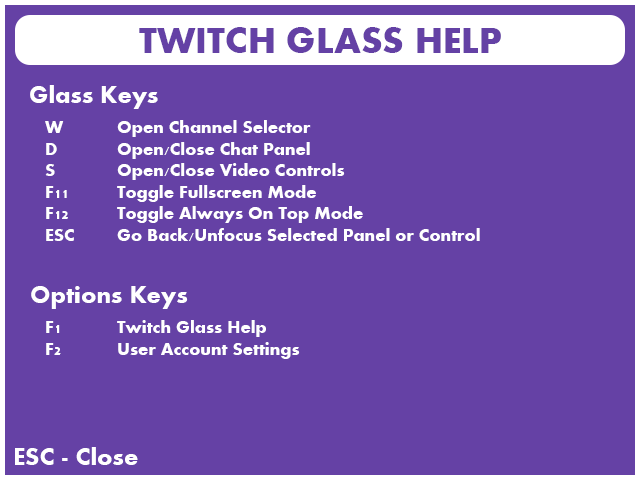
<style>
.page{position:relative;width:640px;height:480px;background:#6541a5}
.page>*{position:absolute;margin:0}
.t1{font:38px "Aharoni-Bold";color:#6441a5}
.t2{font:25px "Aharoni-Bold";color:#ffffff}
.t3{font:18px "Aharoni-Bold";color:#ffffff}
</style>
<div class="page">
<p class="t1" style="left:139px;top:27px;width:362px;height:26px">TWITCH GLASS HELP</p>
<p class="t2" style="left:30px;top:85px;width:128px;height:24px">Glass Keys</p>
<p class="t3" style="left:45px;top:120px;width:435px;height:121px">W  Open Channel Selector<br>D  Open/Close Chat Panel<br>S  Open/Close Video Controls<br>F11  Toggle Fullscreen Mode<br>F12  Toggle Always On Top Mode<br>ESC  Go Back/Unfocus Selected Panel or Control</p>
<p class="t2" style="left:31px;top:286px;width:157px;height:23px">Options Keys</p>
<p class="t3" style="left:46px;top:320px;width:254px;height:39px">F1  Twitch Glass Help<br>F2  User Account Settings</p>
<p class="t2" style="left:15px;top:447px;width:123px;height:18px">ESC - Close</p>
</div>
